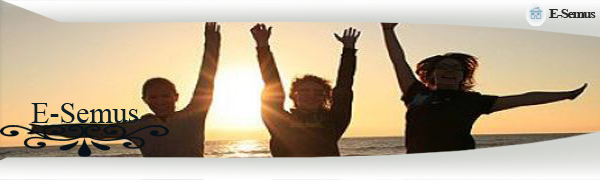
<style>
.page{position:relative;width:600px;height:180px}
.page>*{position:absolute;margin:0}
.t1{font:12px "TimesNewRomanPS-BoldMT";letter-spacing:-0.1em;color:#292b28;scale:1.22 1}
.t2{font:30px "TimesNewRomanPSMT";color:#0c1d27}
</style>
<div class="page">
<p class="t1" style="left:549px;top:9px;width:47px;height:9px">E-Semus</p>
<p class="t2" style="left:31px;top:103px;width:108px;height:20px">E-Semus</p>
</div>
